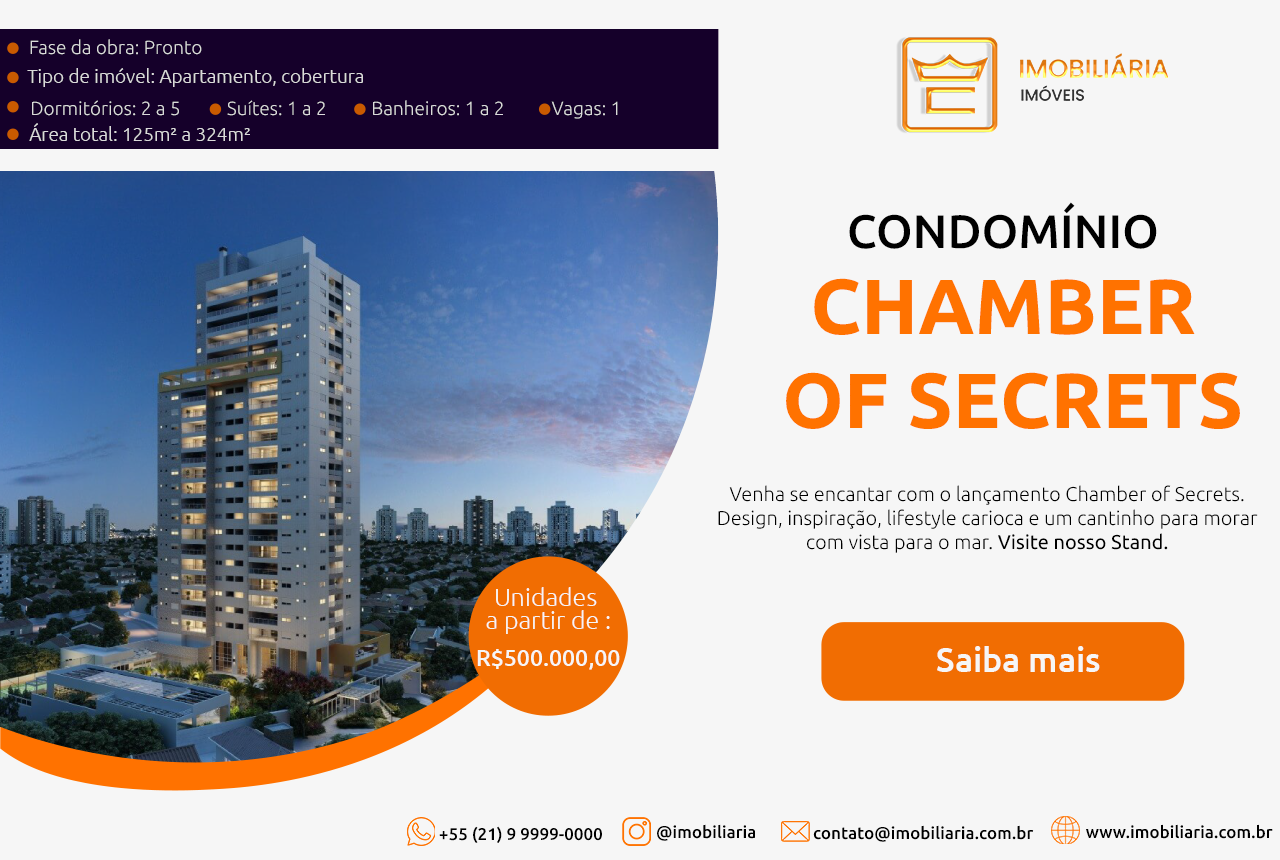
<style>
.page{position:relative;width:1280px;height:860px;background:#f6f6f6}
.page>*{position:absolute;margin:0}
.t1{font:19px "Ubuntu-Light";color:#dadada}
.t2{font:47px "Ubuntu-Medium";color:#000000}
.t3{font:78px "Ubuntu-Bold";color:#ff7200}
.t4{font:20px "Ubuntu-Light";color:#000000}
.t5{font:20px "Ubuntu-Regular";color:#000000}
.t6{font:25px/23px "Ubuntu-Light";color:#f6f6f6}
.t7{font:23px "Ubuntu-Medium";color:#f6f6f6}
.t8{font:34px "Ubuntu-Medium";color:#f6f6f6}
.t9{font:17px "Ubuntu-Medium";color:#000000}
</style>
<div class="page">
<p class="t1" style="left:30px;top:39px;width:172px;height:16px">Fase da obra: Pronto</p>
<p class="t1" style="left:27px;top:68px;width:336px;height:19px">Tipo de imóvel: Apartamento, cobertura</p>
<p class="t1" style="left:31px;top:100px;width:149px;height:16px">Dormitórios: 2 a 5</p>
<p class="t1" style="left:227px;top:100px;width:99px;height:16px">Suítes: 1 a 2</p>
<p class="t1" style="left:372px;top:100px;width:131px;height:16px">Banheiros: 1 a 2</p>
<p class="t1" style="left:551px;top:101px;width:67px;height:18px">Vagas: 1</p>
<p class="t1" style="left:29px;top:123px;width:221px;height:18px">Área total: 125m² a 324m²</p>
<p class="t2" style="left:849px;top:202px;width:308px;height:47px">CONDOMÍNIO</p>
<p class="t3" style="left:786px;top:278px;width:454px;height:152px;text-align:center">CHAMBER <br>OF SECRETS</p>
<p class="t4" style="left:718px;top:485px;width:540px;height:68px;text-align:center">Venha se encantar com o lançamento Chamber of Secrets.<br>Design, inspiração, lifestyle carioca e um cantinho para morar<br> com vista para o mar. <span class="t5">Visite nosso Stand.</span></p>
<p class="t6" style="left:486px;top:587px;width:124px;height:47px;text-align:center">Unidades <br>a partir de :</p>
<p class="t7" style="left:477px;top:649px;width:143px;height:21px">R$500.000,00</p>
<p class="t8" style="left:937px;top:646px;width:163px;height:26px">Saiba mais</p>
<p class="t9" style="left:439px;top:826px;width:164px;height:18px">+55 (21) 9 9999-0000</p>
<p class="t9" style="left:657px;top:824px;width:99px;height:17px">@imobiliaria</p>
<p class="t9" style="left:813px;top:825px;width:221px;height:17px">contato@imobiliaria.com.br</p>
<p class="t9" style="left:1085px;top:824px;width:188px;height:15px">www.imobiliaria.com.br</p>
</div>
